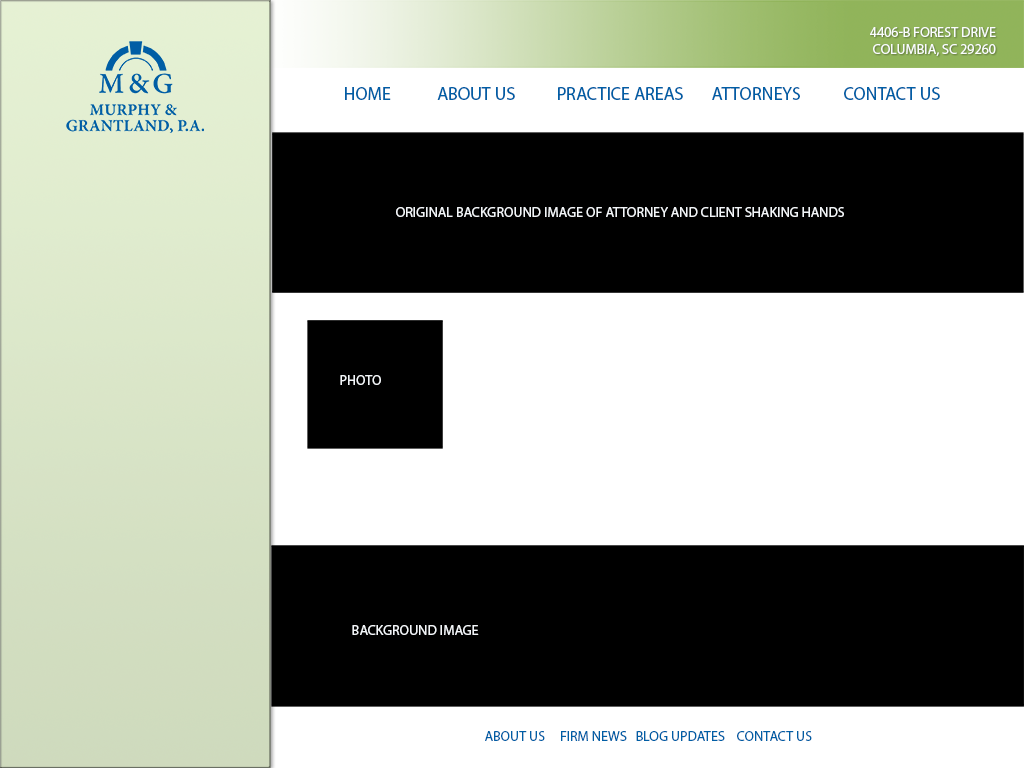
<style>
.page{position:relative;width:1024px;height:768px;background:#ffffff}
.page>*{position:absolute;margin:0}
.t1{font:14px "MyriadPro-Regular";color:#fafcfd;text-transform:uppercase}
.t2{font:18px "MyriadPro-Regular";color:#005ea5;text-transform:uppercase}
.t3{font:14px "MyriadPro-Regular";color:#f3f6f9;text-transform:uppercase}
.t4{font:14px "MyriadPro-Regular";color:#005ea5;text-transform:uppercase}
</style>
<div class="page">
<p class="t1" style="left:870px;top:27px;width:126px;height:29px;text-align:right">4406-B forest drive<br>columbia, sc 29260</p>
<p class="t2" style="left:345px;top:87px;width:46px;height:13px">HOME</p>
<p class="t2" style="left:437px;top:87px;width:78px;height:13px">About us</p>
<p class="t2" style="left:558px;top:87px;width:125px;height:13px">practice areas</p>
<p class="t2" style="left:712px;top:87px;width:88px;height:13px">attorneys</p>
<p class="t2" style="left:844px;top:87px;width:96px;height:13px">contact us</p>
<p class="t3" style="left:396px;top:207px;width:448px;height:10px">Original Background Image of Attorney and Client shaking hands</p>
<p class="t3" style="left:340px;top:375px;width:41px;height:10px">Photo</p>
<p class="t3" style="left:352px;top:625px;width:127px;height:10px">Background image</p>
<p class="t4" style="left:485px;top:731px;width:327px;height:10px">about Us     Firm News   Blog Updates    Contact Us</p>
</div>
